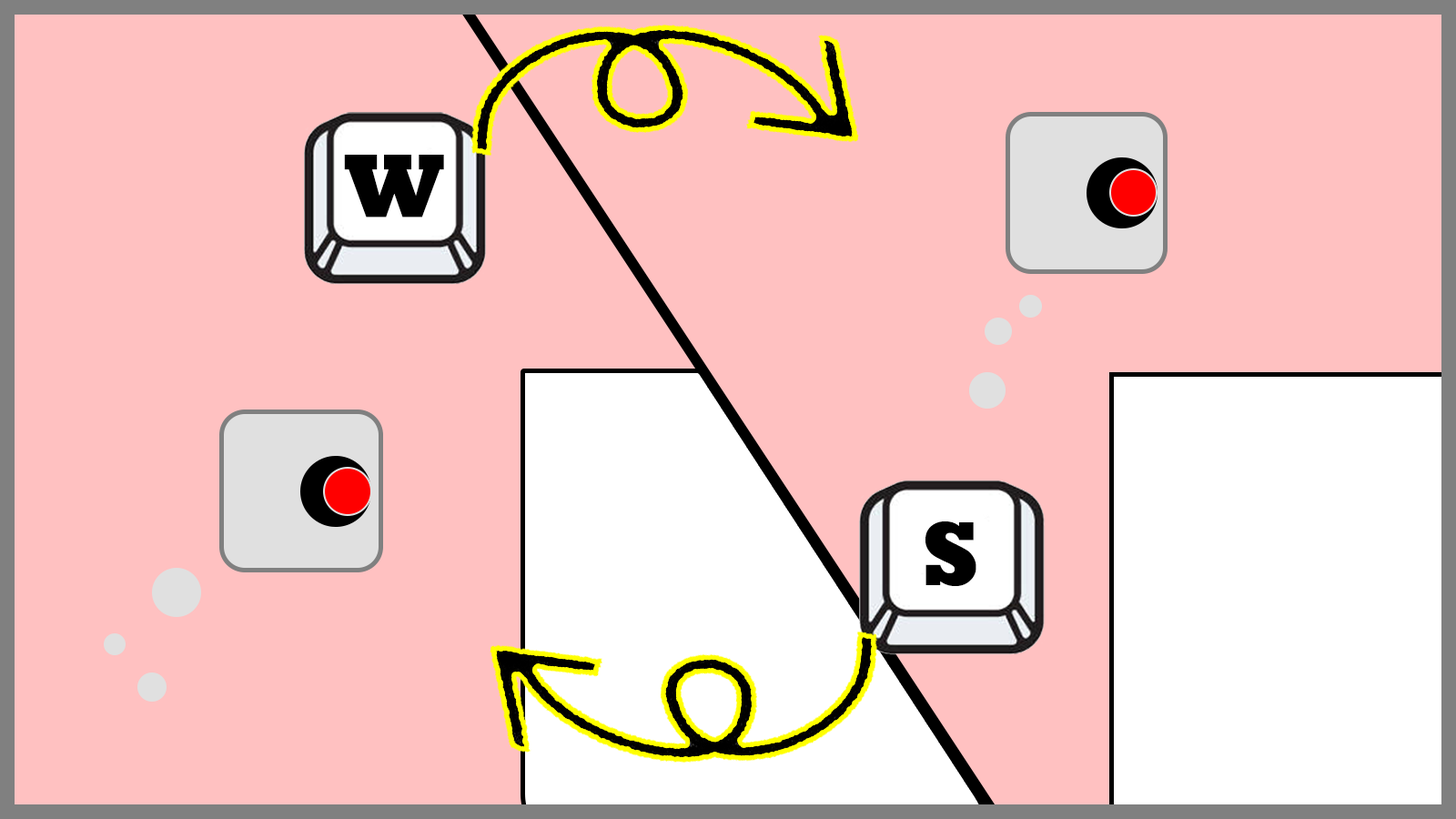
<style>
.page{position:relative;width:1456px;height:819px;background:#ffc1c1}
.page>*{position:absolute;margin:0}
.t1{font:91.3px "Rockwell-ExtraBold";letter-spacing:-0.075em;color:#000000}
.t2{font:92.6px "Rockwell-ExtraBold";letter-spacing:-0.075em;color:#000000}
</style>
<div class="page">
<p class="t1" style="left:344px;top:155px;width:100px;height:62px">W</p>
<p class="t2" style="left:925px;top:521px;width:51px;height:65px">S</p>
</div>
